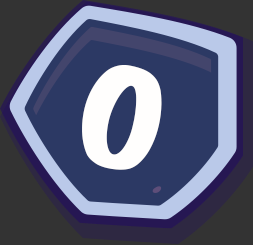
<style>
.page{position:relative;width:253px;height:245px;background:#2c3964}
.page>*{position:absolute;margin:0}
.t1{font:120px "KomikaAxis";color:#fffefd}
</style>
<div class="page">
<p class="t1" style="left:82px;top:65px;width:80px;height:105px">0</p>
</div>
